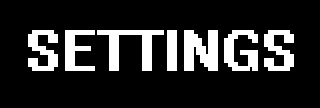
<style>
.page{position:relative;width:320px;height:108px;background:#000000}
.page>*{position:absolute;margin:0}
.t1{font:50px "System";letter-spacing:0.025em;color:#ffffff;font-weight:bold}
</style>
<div class="page">
<p class="t1" style="left:28px;top:30px;width:266px;height:41px">SETTINGS</p>
</div>
